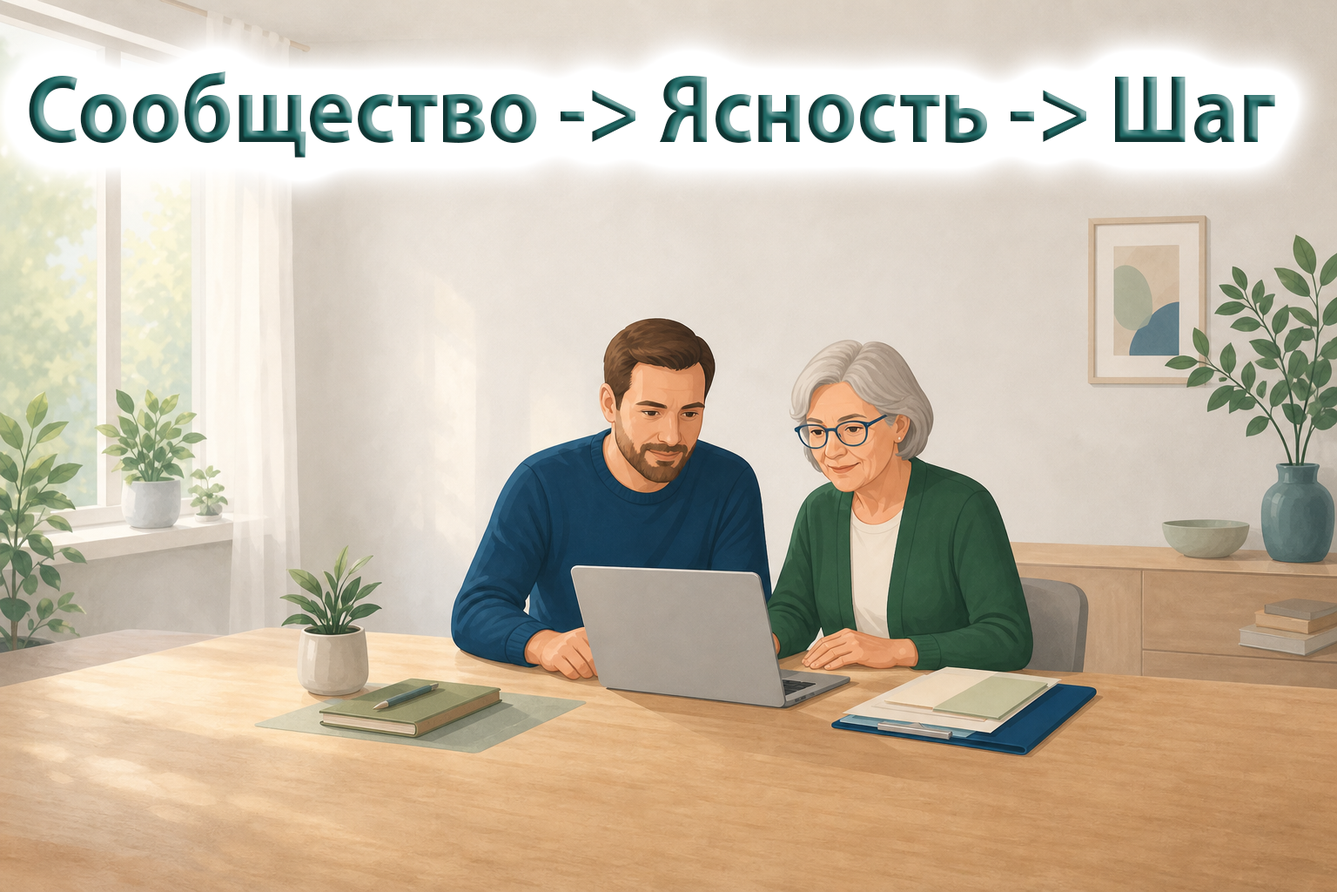
<style>
.page{position:relative;width:1337px;height:892px}
.page>*{position:absolute;margin:0}
.t1{font:97.5px "MyriadPro-Bold";scale:0.92 1}
</style>
<div class="page">
<p class="t1" style="left:29px;top:71px;width:1247px;height:87px">Сообщество -&gt; Ясность -&gt; Шаг</p>
</div>
